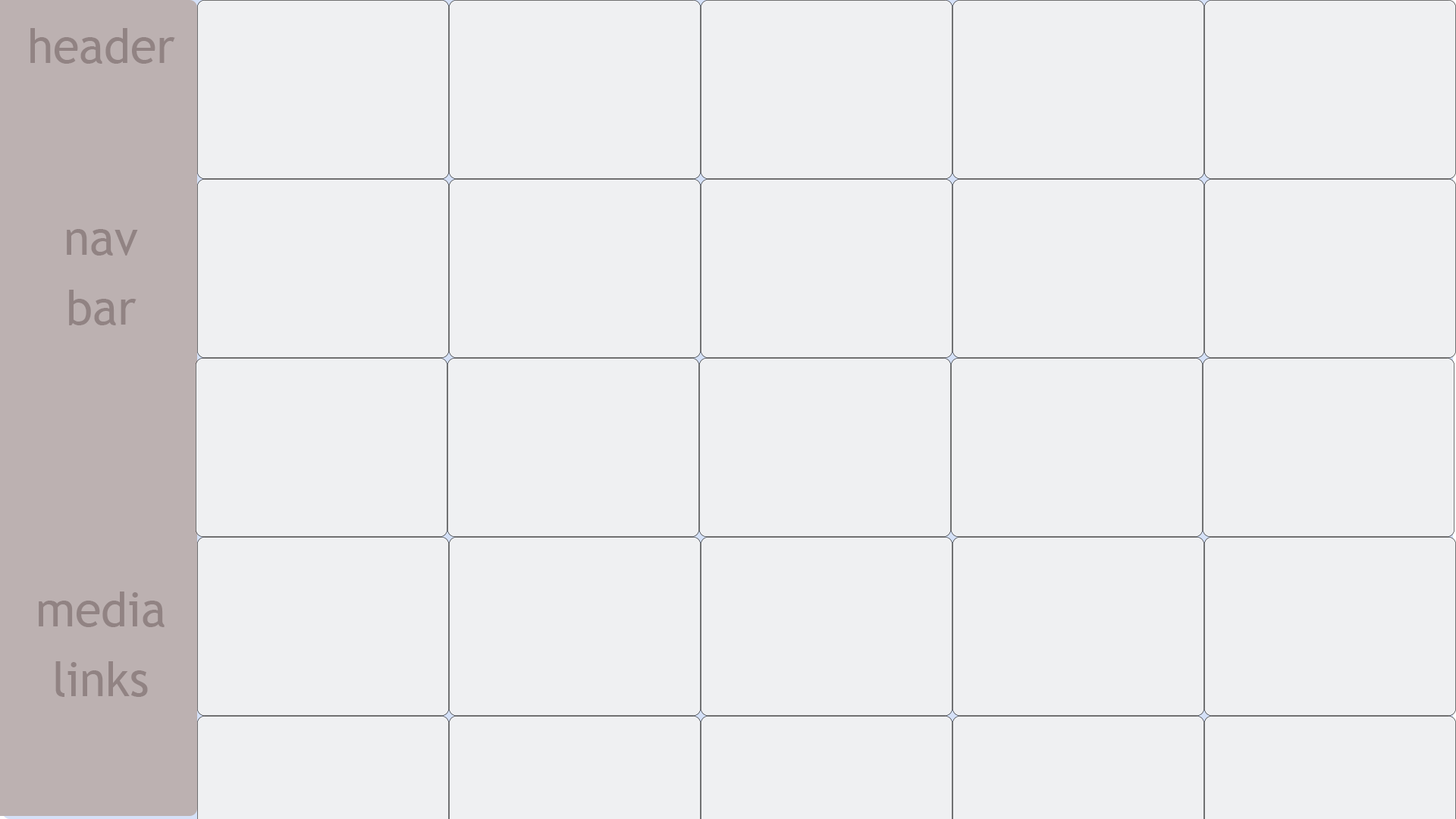
<style>
.page{position:relative;width:1456px;height:819px;background:#eff0f2}
.page>*{position:absolute;margin:0}
.t1{font:47.4px "TrebuchetMS";color:#918383}
.t2{font:47.4px/69.5px "TrebuchetMS";color:#918383}
</style>
<div class="page">
<p class="t1" style="left:30px;top:28px;width:145px;height:36px">header</p>
<p class="t2" style="left:67px;top:229px;width:71px;height:96px;text-align:center">nav<br>bar</p>
<p class="t2" style="left:39px;top:591px;width:126px;height:106px;text-align:center">media<br>links</p>
</div>
